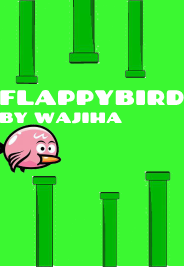
<style>
.page{position:relative;width:184px;height:267px;background:#3bf831}
.page>*{position:absolute;margin:0}
.t1{font:21px "Chango-Regular";color:#ffffff}
.t2{font:15px "Chango-Regular";color:#ffffff}
</style>
<div class="page">
<p class="t1" style="left:0px;top:90px;width:184px;height:34px">FLAPPYBIRD <br><span class="t2">BY WAJIHA</span></p>
</div>
